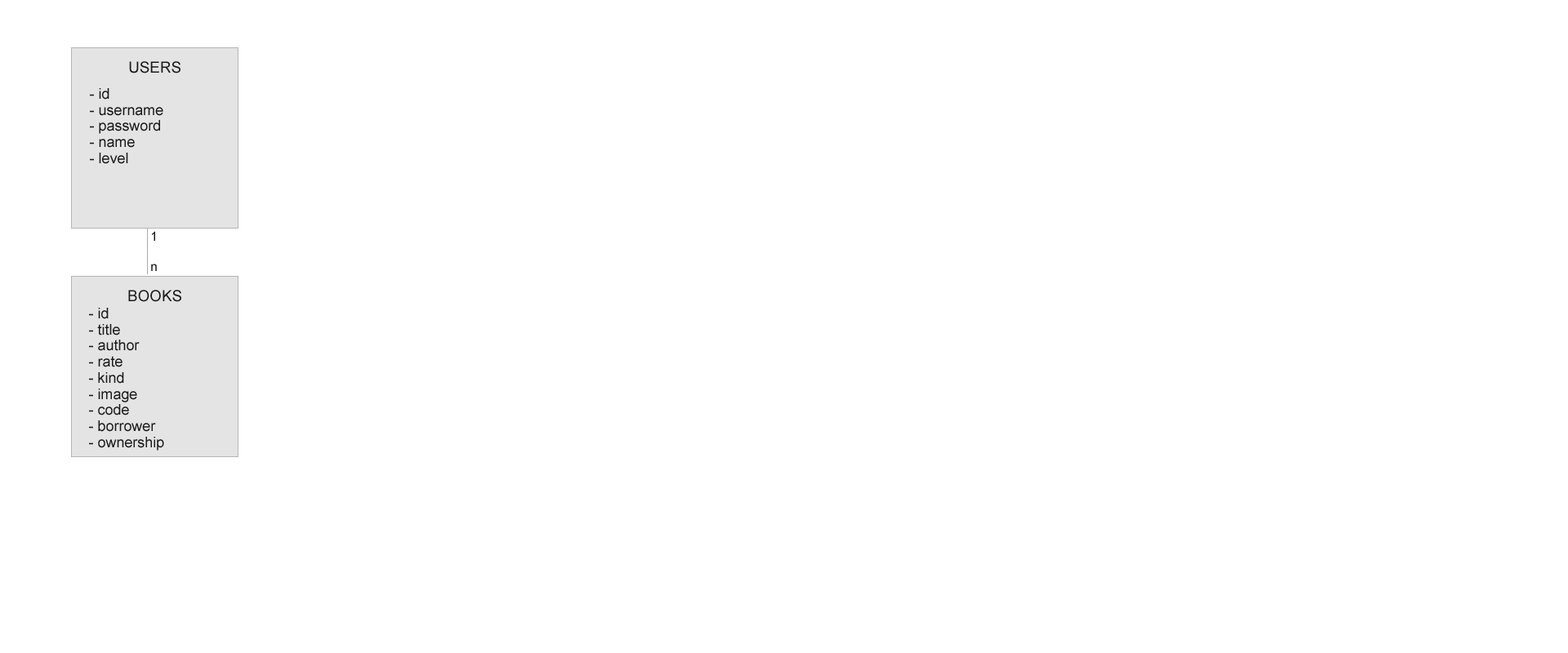
<style>
.page{position:relative;width:1568px;height:653px;background:#ffffff}
.page>*{position:absolute;margin:0}
.t1{font:15.4px "ArialMT";color:#181818}
.t2{font:14.6px/16.1px "ArialMT";color:#181818}
.t3{font:12.7px "ArialMT";color:#181818}
</style>
<div class="page">
<p class="t1" style="left:129px;top:61px;width:51px;height:13px">USERS</p>
<p class="t2" style="left:90px;top:88px;width:73px;height:76px">- id<br>- username<br>- password<br>- name<br>- level</p>
<p class="t3" style="left:152px;top:231px;width:3px;height:10px">1</p>
<p class="t3" style="left:151px;top:264px;width:6px;height:7px">n</p>
<p class="t1" style="left:128px;top:290px;width:53px;height:12px">BOOKS</p>
<p class="t2" style="left:89px;top:308px;width:75px;height:143px">- id<br>- title<br>- author<br>- rate<br>- kind<br>- image<br>- code<br>- borrower<br>- ownership</p>
</div>
